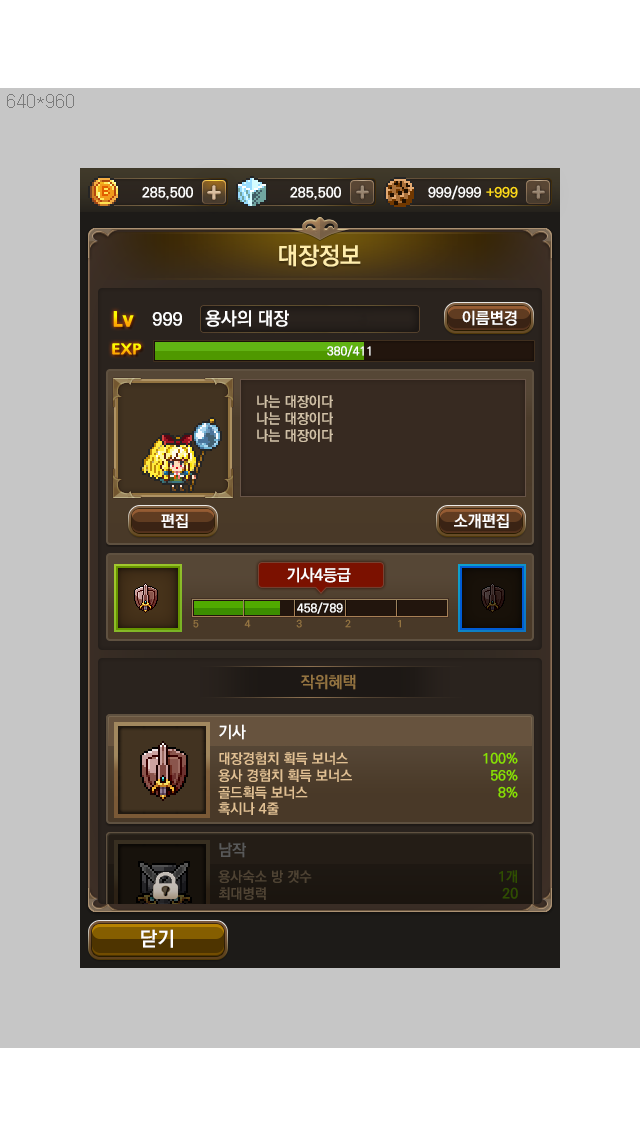
<style>
.page{position:relative;width:640px;height:1136px;background:#c6c6c6}
.page>*{position:absolute;margin:0}
.t1{font:24px "KoPubDotumBold";color:#ffedab}
.t2{font:18px "KoPubDotumBold";color:#ffffff}
.t3{font:16px "KoPubDotumBold";color:#ffffff}
.t4{font:12px "KoPubDotumBold";color:#ffffff}
.t5{font:14px "KoPubDotumBold";color:#d0c0a6}
.t6{font:10px "KoPubDotumBold";color:#947441}
.t7{font:16px "KoPubDotumBold";color:#947441}
.t8{font:14px "KoPubDotumBold";color:#e1c093}
.t9{font:14px "KoPubDotumBold";color:#88e000}
.t10{font:20px "KoPubDotumBold";color:#ffffff}
</style>
<div class="page">
<p class="t1" style="left:279px;top:244px;width:82px;height:23px">대장정보</p>
<p class="t2" style="left:152px;top:312px;width:30px;height:14px">999</p>
<p class="t2" style="left:205px;top:310px;width:84px;height:17px">용사의 대장</p>
<p class="t3" style="left:462px;top:310px;width:55px;height:16px">이름변경</p>
<p class="t4" style="left:327px;top:345px;width:44px;height:12px">380/411</p>
<p class="t5" style="left:257px;top:395px;width:76px;height:47px">나는 대장이다<br>나는 대장이다 <br>나는 대장이다</p>
<p class="t3" style="left:161px;top:513px;width:27px;height:15px">편집</p>
<p class="t3" style="left:454px;top:513px;width:55px;height:16px">소개편집</p>
<p class="t3" style="left:287px;top:567px;width:64px;height:16px">기사4등급</p>
<p class="t4" style="left:297px;top:602px;width:46px;height:12px">458/789</p>
<p class="t6" style="left:193px;top:619px;width:208px;height:9px">5                4                3               2                1</p>
<p class="t7" style="left:300px;top:674px;width:56px;height:16px">작위혜택</p>
<p class="t3" style="left:219px;top:724px;width:27px;height:16px">기사</p>
<p class="t8" style="left:218px;top:752px;width:134px;height:63px">대장경험치 획득 보너스<br>용사 경험치 획득 보너스<br>골드획득 보너스<br>혹시나 4줄</p>
<p class="t9" style="left:483px;top:752px;width:35px;height:46px;text-align:right">100%<br>56%<br>8%</p>
<p class="t10" style="left:141px;top:929px;width:32px;height:19px">닫기</p>
</div>
